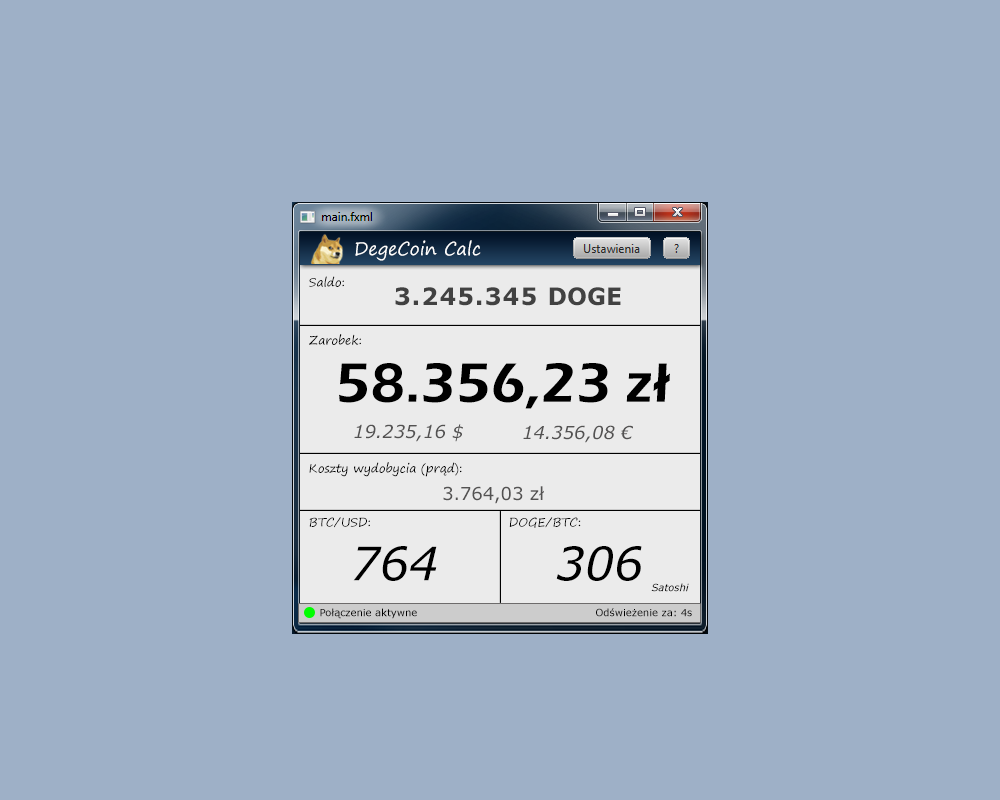
<style>
.page{position:relative;width:1000px;height:800px;background:#9eb0c7}
.page>*{position:absolute;margin:0}
.t1{font:18px "SegoePrint";color:#ffffff}
.t2{font:12px "SegoePrint";color:#010101}
.t3{font:24px "Verdana-Bold";letter-spacing:0.05em;color:#414141}
.t4{font:24px "Verdana-Bold";color:#414141}
.t5{font:57.2px "ErasITC-Demi";color:#000000}
.t6{font:18px "Verdana-Italic";color:#535252}
.t7{font:18px "Verdana";color:#535252}
.t8{font:46px "Verdana-Italic";color:#000000}
.t9{font:10px "Verdana-Italic";color:#000000}
.t10{font:10px "Verdana";color:#000000}
</style>
<div class="page">
<p class="t1" style="left:355px;top:240px;width:126px;height:21px">DegeCoin Calc</p>
<p class="t2" style="left:309px;top:276px;width:35px;height:11px">Saldo:</p>
<p class="t3" style="left:395px;top:287px;width:226px;height:19px">3.245.345 <span class="t4">DOGE</span></p>
<p class="t2" style="left:309px;top:334px;width:52px;height:11px">Zarobek:</p>
<p class="t5" style="left:339px;top:363px;width:331px;height:46px">58.356,23 zł</p>
<p class="t6" style="left:354px;top:424px;width:109px;height:18px">19.235,16 $</p>
<p class="t6" style="left:523px;top:425px;width:110px;height:18px">14.356,08 €</p>
<p class="t2" style="left:309px;top:462px;width:153px;height:15px">Koszty wydobycia (prąd):</p>
<p class="t7" style="left:443px;top:486px;width:101px;height:18px">3.764,03 zł</p>
<p class="t2" style="left:309px;top:517px;width:61px;height:11px">BTC/USD:</p>
<p class="t2" style="left:509px;top:517px;width:72px;height:11px">DOGE/BTC:</p>
<p class="t8" style="left:353px;top:546px;width:84px;height:35px">764</p>
<p class="t8" style="left:556px;top:546px;width:86px;height:35px">306</p>
<p class="t9" style="left:651px;top:583px;width:38px;height:9px">Satoshi</p>
<p class="t10" style="left:320px;top:608px;width:97px;height:11px">Połączenie aktywne</p>
<p class="t10" style="left:596px;top:608px;width:96px;height:9px">Odświeżenie za: 4s</p>
</div>
